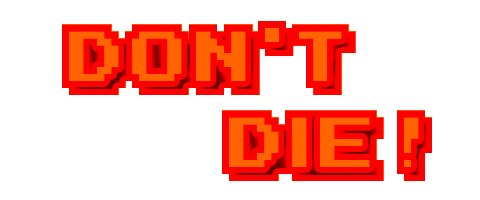
<style>
.page{position:relative;width:480px;height:200px;background:#ffffff}
.page>*{position:absolute;margin:0}
.t1{font:72px "KarmaticArcade";color:#ff0000}
</style>
<div class="page">
<p class="t1" style="left:62px;top:24px;width:370px;height:157px">DON  T <br>        DIE !</p>
<p class="t1" style="left:258px;top:21px;width:36px;height:35px">.</p>
</div>
